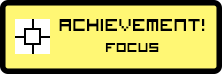
<style>
.page{position:relative;width:222px;height:74px;background:#fff774}
.page>*{position:absolute;margin:0}
.t1{font:23px "VisitorTT1BRK";color:#000000}
.t2{font:18px "VisitorTT1BRK";color:#000000}
</style>
<div class="page">
<p class="t1" style="left:59px;top:19px;width:146px;height:33px;text-align:center">achievement!<br><span class="t2">Focus</span></p>
</div>
